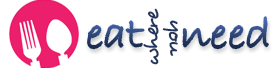
<style>
.page{position:relative;width:276px;height:68px;background:#ffffff}
.page>*{position:absolute;margin:0}
.t1{font:43.5px "BradleyHandITC";scale:1.1 1}
.t2{font:24px "Desyrel";color:#23365f;scale:0.91 1}
</style>
<div class="page">
<p class="t1" style="left:88px;top:17px;width:180px;height:32px">eat   need</p>
<p class="t2" style="left:143px;top:8px;width:16px;height:57px;rotate:-90deg">where</p>
<p class="t2" style="left:162px;top:20px;width:16px;height:36px;rotate:90deg">you</p>
</div>
